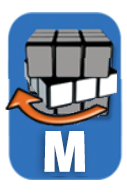
<style>
.page{position:relative;width:127px;height:195px;background:#ffffff}
.page>*{position:absolute;margin:0}
.t1{font:64px "SlatePro-BlackCondensed";color:#ffffff}
</style>
<div class="page">
<p class="t1" style="left:44px;top:131px;width:41px;height:41px">M</p>
</div>
